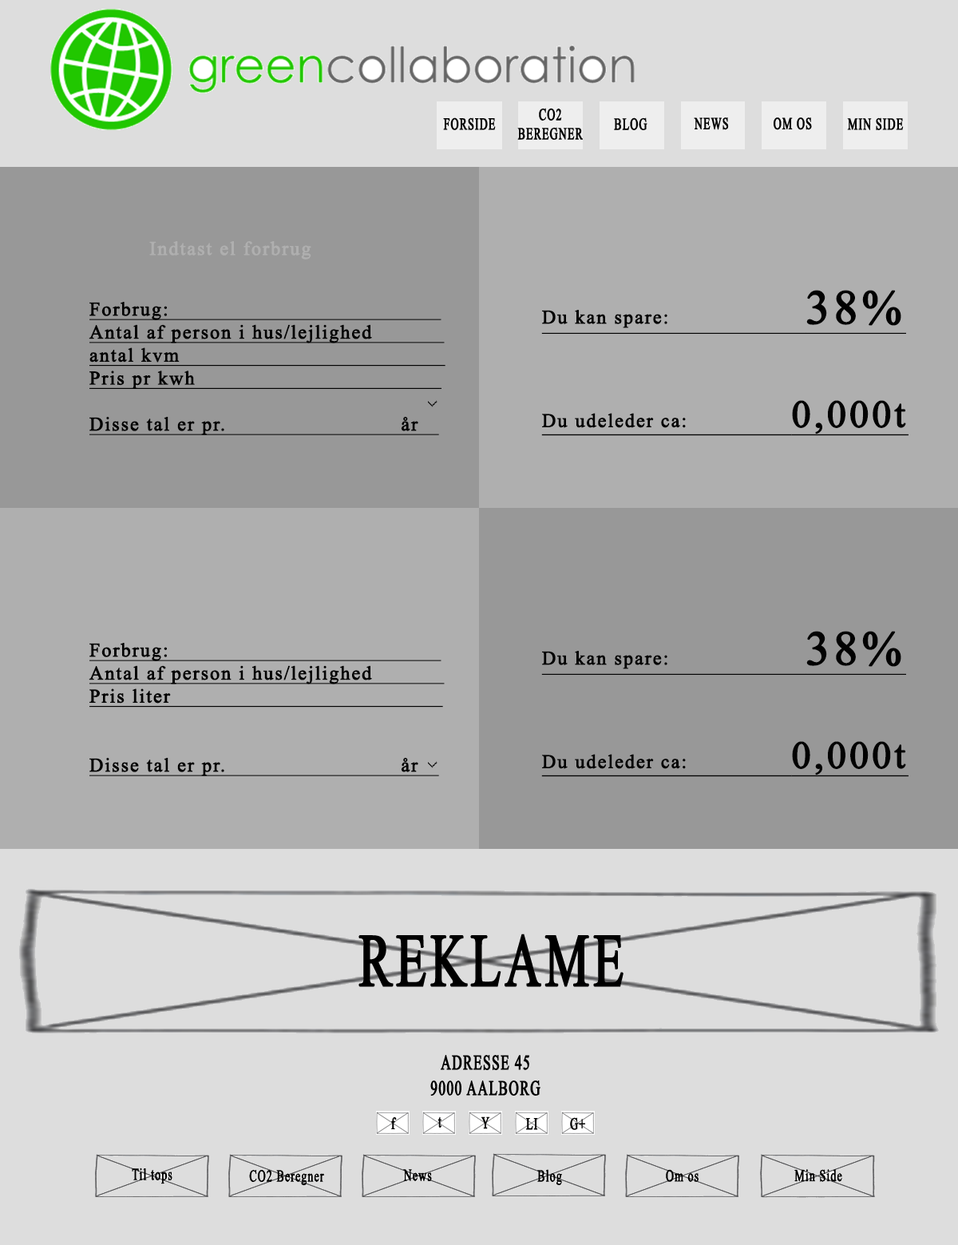
<style>
.page{position:relative;width:958px;height:1245px;background:#dddddd}
.page>*{position:absolute;margin:0}
.t1{font:19.2px "TimesNewRomanPSMT";letter-spacing:0.06em;color:#afafaf;font-weight:bold}
.t2{font:19.2px "TimesNewRomanPSMT";letter-spacing:0.06em;color:#020202;font-weight:bold;text-decoration:underline}
.t3{font:47.9px "TimesNewRomanPSMT";letter-spacing:0.06em;color:#020202;font-weight:bold;text-decoration:underline}
.t4{font:38.3px "TimesNewRomanPSMT";letter-spacing:0.06em;color:#020202;font-weight:bold;text-decoration:underline}
</style>
<div class="page">
<p class="t1" style="left:149px;top:241px;width:162px;height:18px">Indtast el forbrug</p>
<p class="t2" style="left:541px;top:290px;width:368px;height:146px">Du kan spare:                     <span class="t3">38%<br><br></span>Du udeleder ca:                <span class="t4">0,000t</span></p>
<p class="t2" style="left:89px;top:302px;width:356px;height:133px">Forbrug:                                          <br>Antal af person i hus/lejlighed           <br>antal kvm                                         <br>Pris pr kwh                                      <br><br>Disse tal er pr.                           år</p>
<p class="t2" style="left:541px;top:631px;width:368px;height:146px">Du kan spare:                     <span class="t3">38%<br><br></span>Du udeleder ca:                <span class="t4">0,000t</span></p>
<p class="t2" style="left:89px;top:643px;width:356px;height:133px">Forbrug:                                          <br>Antal af person i hus/lejlighed           <br>Pris liter                                          <br><br><br>Disse tal er pr.                           år</p>
</div>
